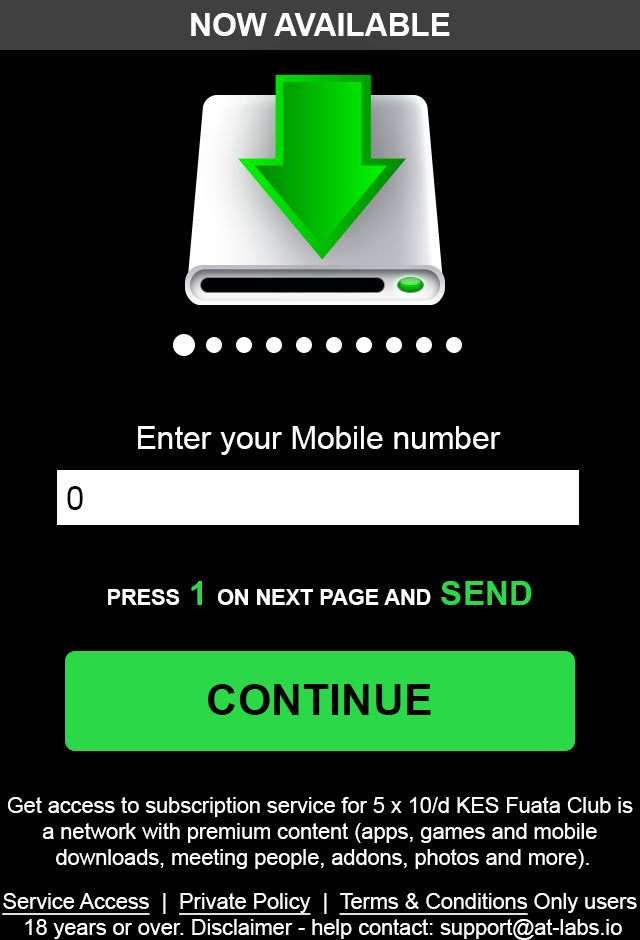
<style>
.page{position:relative;width:640px;height:940px;background:#000000}
.page>*{position:absolute;margin:0}
.t1{font:31.7px "Arial-BoldMT";color:#ffffff;text-transform:uppercase}
.t2{font:31.7px "ArialMT";color:#ffffff}
.t3{font:33.3px "ArialMT";color:#000000}
.t4{font:21.7px "Arial-BoldMT";color:#ffffff;text-transform:uppercase}
.t5{font:33.3px "Arial-BoldMT";color:#2bd948;text-transform:uppercase}
.t6{font:43.3px "Arial-BoldMT";color:#000000;text-transform:uppercase}
.t7{font:21.7px "ArialMT";color:#ffffff}
.t8{font:21.7px "ArialMT";color:#ffffff;text-decoration:underline}
</style>
<div class="page">
<p class="t1" style="left:191px;top:13px;width:259px;height:23px">Now available</p>
<p class="t2" style="left:138px;top:426px;width:363px;height:29px">Enter your Mobile number</p>
<p class="t3" style="left:67px;top:486px;width:16px;height:24px">0</p>
<p class="t4" style="left:108px;top:581px;width:424px;height:24px">press <span class="t5">1 </span>on next page and <span class="t5">Send</span></p>
<p class="t6" style="left:208px;top:684px;width:223px;height:31px">continue</p>
<p class="t7" style="left:7px;top:797px;width:626px;height:72px;text-align:center">Get access to subscription service for 5 x 10/d KES Fuata Club is <br>a network with premium content (apps, games and mobile <br>downloads, meeting people, addons, photos and more).</p>
<p class="t7" style="left:2px;top:893px;width:635px;height:47px;text-align:center"><span class="t8">Service Access</span>  |  <span class="t8">Private Policy</span>  |  <span class="t8">Terms &amp; Conditions</span> Only users <br>18 years or over. Disclaimer - help contact: support@at-labs.io</p>
</div>
